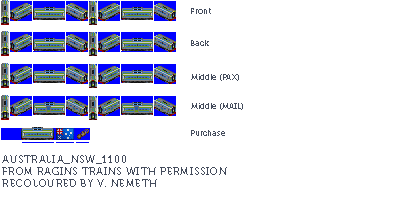
<style>
.page{position:relative;width:400px;height:217px;background:#ffffff}
.page>*{position:absolute;margin:0}
.t1{font:8px "Museo700-Regular";color:#444c5c}
.t2{font:10px "Museo700-Regular";letter-spacing:0.075em;color:#444c5c;text-transform:uppercase}
</style>
<div class="page">
<p class="t1" style="left:191px;top:8px;width:20px;height:6px">Front</p>
<p class="t1" style="left:191px;top:40px;width:18px;height:6px">Back</p>
<p class="t1" style="left:191px;top:74px;width:48px;height:7px">Middle (PAX)</p>
<p class="t1" style="left:191px;top:103px;width:52px;height:7px">Middle (MAIL)</p>
<p class="t1" style="left:191px;top:130px;width:34px;height:6px">Purchase</p>
<p class="t2" style="left:2px;top:155px;width:225px;height:32px">Australia_NSW_1100<br>from ragins trains with permission<br>recoloured by v. nemeth</p>
</div>
